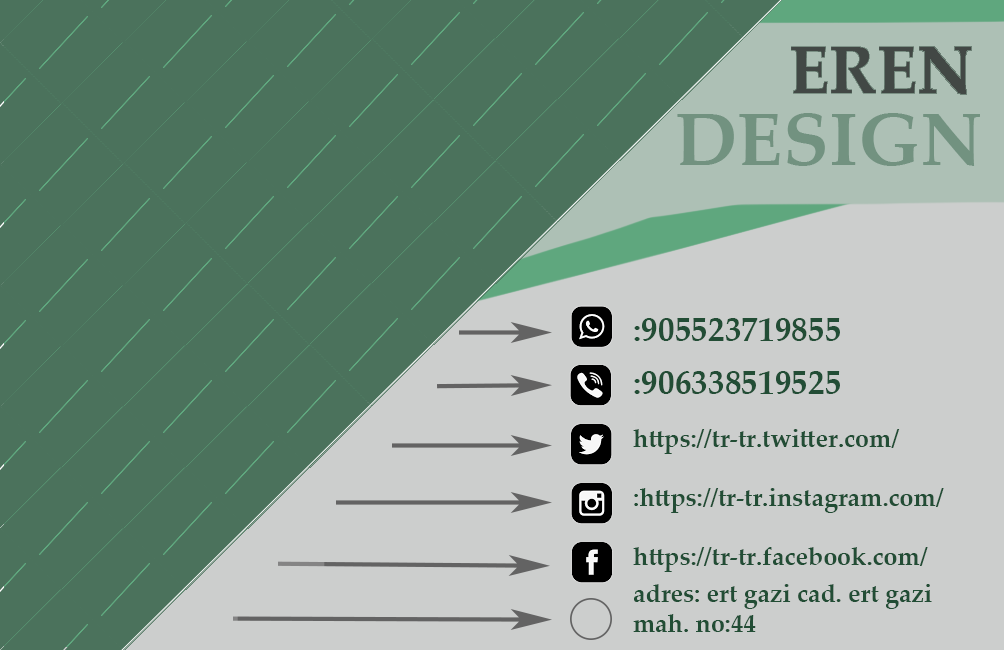
<style>
.page{position:relative;width:1004px;height:650px;background:#4b725c}
.page>*{position:absolute;margin:0}
.t1{font:75px "PalatinoLinotype-Bold";color:#729280}
.t2{font:33.3px "PalatinoLinotype-Bold";color:#224d35}
.t3{font:25px "PalatinoLinotype-Bold";color:#224d35}
</style>
<div class="page">
<p class="t1" style="left:677px;top:113px;width:303px;height:53px">DESIGN</p>
<p class="t2" style="left:634px;top:318px;width:206px;height:23px">:905523719855</p>
<p class="t2" style="left:634px;top:371px;width:206px;height:23px">:906338519525</p>
<p class="t3" style="left:633px;top:429px;width:267px;height:25px">https://tr-tr.twitter.com/</p>
<p class="t3" style="left:634px;top:488px;width:310px;height:25px">:https://tr-tr.instagram.com/</p>
<p class="t3" style="left:633px;top:547px;width:295px;height:25px">https://tr-tr.facebook.com/</p>
<p class="t3" style="left:633px;top:584px;width:299px;height:48px">adres: ert gazi cad. ert gazi mah. no:44</p>
</div>
